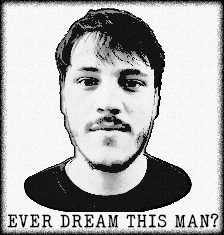
<style>
.page{position:relative;width:224px;height:235px}
.page>*{position:absolute;margin:0}
.t1{font:19px "ELEGANTTYPEWRITER";color:#000000}
</style>
<div class="page">
<p class="t1" style="left:7px;top:213px;width:212px;height:15px">EVER DREAM THIS MAN?</p>
</div>
